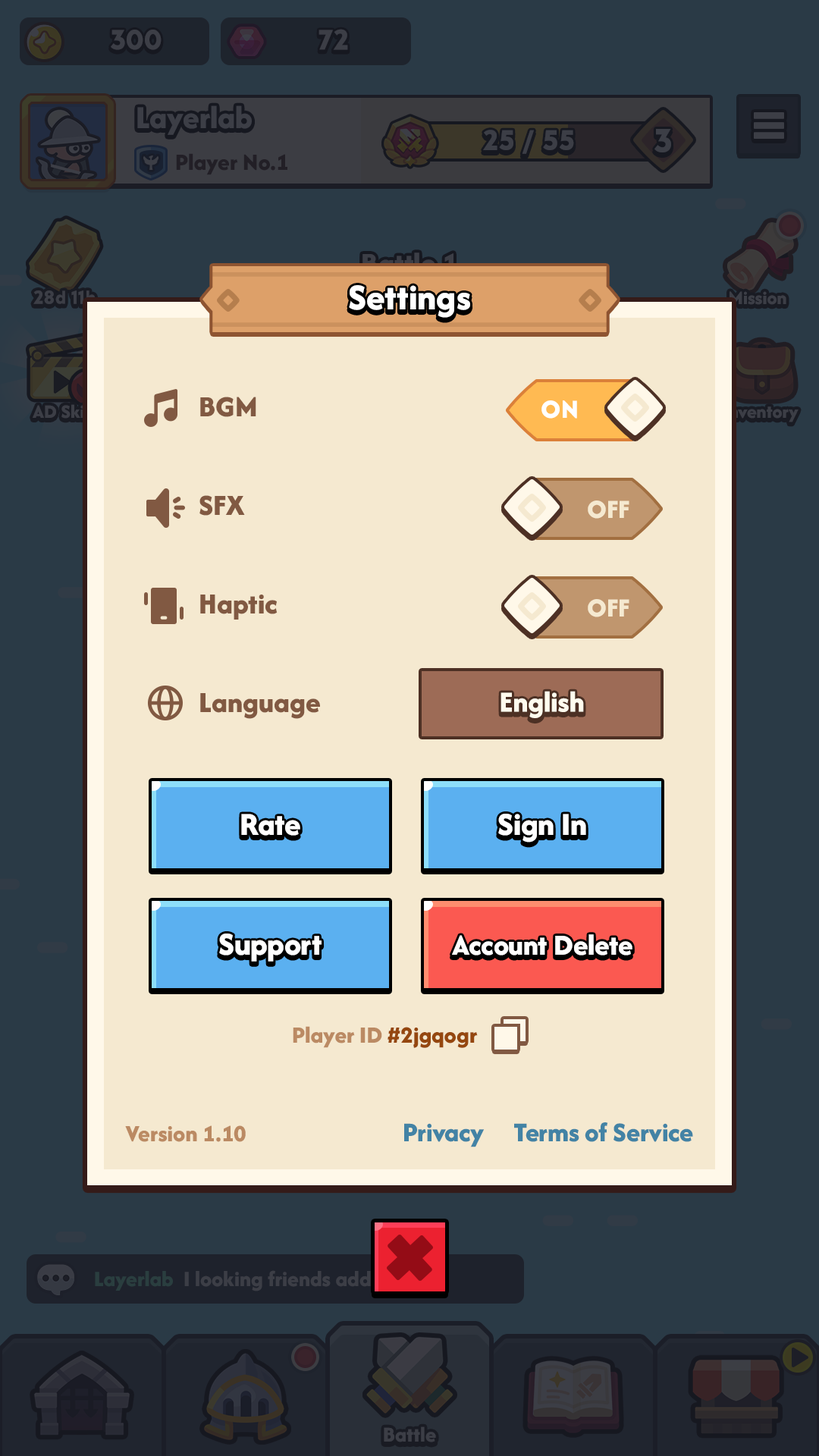
<style>
.page{position:relative;width:819px;height:1456px;background:#2a3a46}
.page>*{position:absolute;margin:0}
.t1{font:37.9px "AfacadFlux-ExtraBold";color:#ffffff}
.t2{font:30.3px/98.6px "AfacadFlux-ExtraBold";color:#815942}
.t3{font:27.3px "AfacadFlux-ExtraBold";color:#ffffff;text-transform:uppercase}
.t4{font:27.3px "AfacadFlux-ExtraBold";color:#f5e9d0;text-transform:uppercase}
.t5{font:30.3px "AfacadFlux-ExtraBold";color:#815942}
.t6{font:30.3px "AfacadFlux-ExtraBold";color:#fffcee}
.t7{font:33.4px "AfacadFlux-ExtraBold";color:#ffffff}
.t8{font:30.3px "AfacadFlux-ExtraBold";color:#ffffff}
.t9{font:24.3px "AfacadFlux-ExtraBold";color:#bb8a63}
.t10{font:24.3px "AfacadFlux-ExtraBold";color:#95470f}
.t11{font:28.1px "AfacadFlux-ExtraBold";color:#4383a5}
</style>
<div class="page">
<p class="t1" style="left:349px;top:285px;width:121px;height:33px">Settings</p>
<p class="t2" style="left:199px;top:397px;width:79px;height:223px">BGM<br>SFX<br>Haptic</p>
<p class="t3" style="left:541px;top:400px;width:36px;height:19px">ON</p>
<p class="t4" style="left:588px;top:500px;width:41px;height:19px">OFF</p>
<p class="t4" style="left:588px;top:599px;width:41px;height:18px">OFF</p>
<p class="t5" style="left:200px;top:693px;width:120px;height:26px">Language</p>
<p class="t6" style="left:500px;top:691px;width:84px;height:27px">English</p>
<p class="t7" style="left:241px;top:814px;width:59px;height:22px">Rate</p>
<p class="t7" style="left:498px;top:814px;width:88px;height:28px">Sign In</p>
<p class="t7" style="left:219px;top:933px;width:103px;height:29px">Support</p>
<p class="t8" style="left:452px;top:934px;width:180px;height:21px">Account Delete</p>
<p class="t9" style="left:293px;top:1026px;width:185px;height:22px">Player ID <span class="t10">#2jgqogr</span></p>
<p class="t9" style="left:125px;top:1125px;width:121px;height:17px">Version 1.10</p>
<p class="t11" style="left:404px;top:1122px;width:289px;height:25px">Privacy     Terms of Service</p>
</div>
